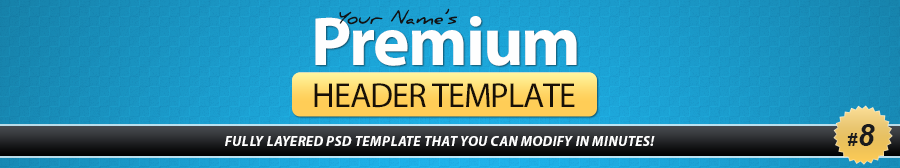
<style>
.page{position:relative;width:900px;height:168px}
.page>*{position:absolute;margin:0}
.t1{font:69.8px "MyriadPro-Bold";letter-spacing:-0.03em;color:#fefefe}
.t2{font:18px "DanielBold";color:#121314;font-style:italic}
.t3{font:34.8px "MyriadPro-Regular";letter-spacing:-0.03em;color:#181007;text-transform:uppercase}
.t4{font:18px "Arial-BoldItalicMT";letter-spacing:0.025em;color:#1a1b1d;text-transform:uppercase}
.t5{font:30.4px "Arial-BoldItalicMT";letter-spacing:0.025em;color:#1a1b1d;text-transform:uppercase}
.t6{font:14px "MyriadPro-BoldIt";letter-spacing:0.025em;color:#ffffff;text-transform:uppercase}
</style>
<div class="page">
<p class="t1" style="left:315px;top:16px;width:262px;height:50px">Premium</p>
<p class="t2" style="left:339px;top:8px;width:118px;height:17px">Your Name’s</p>
<p class="t3" style="left:314px;top:83px;width:261px;height:25px">Header Template</p>
<p class="t4" style="left:847px;top:124px;width:28px;height:22px">#<span class="t5">8</span></p>
<p class="t6" style="left:225px;top:136px;width:430px;height:10px">Fully Layered PSD Template That You Can Modify In Minutes!</p>
</div>
